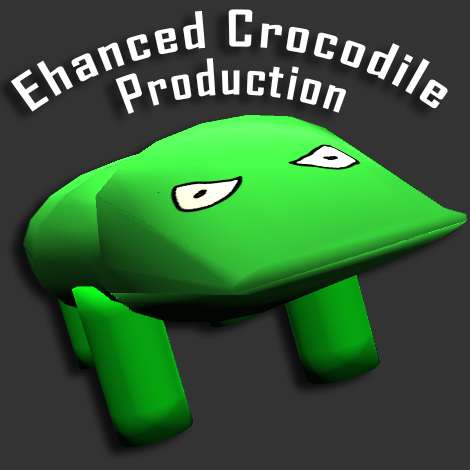
<style>
.page{position:relative;width:470px;height:470px;background:#333333}
.page>*{position:absolute;margin:0}
.t1{font:48px/48px "AgencyFB-Bold";letter-spacing:0.05em;color:#ffffff}
</style>
<div class="page">
<p class="t1" style="left:10px;top:9px;width:438px;height:105px;text-align:center">Ehanced Crocodile<br>Production</p>
</div>
